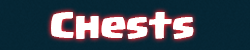
<style>
.page{position:relative;width:250px;height:50px}
.page>*{position:absolute;margin:0}
.t1{font:29.1px "Supercell-Magic";color:#ffffff;scale:1.03 1}
</style>
<div class="page">
<p class="t1" style="left:51px;top:12px;width:143px;height:27px">Chests</p>
</div>
